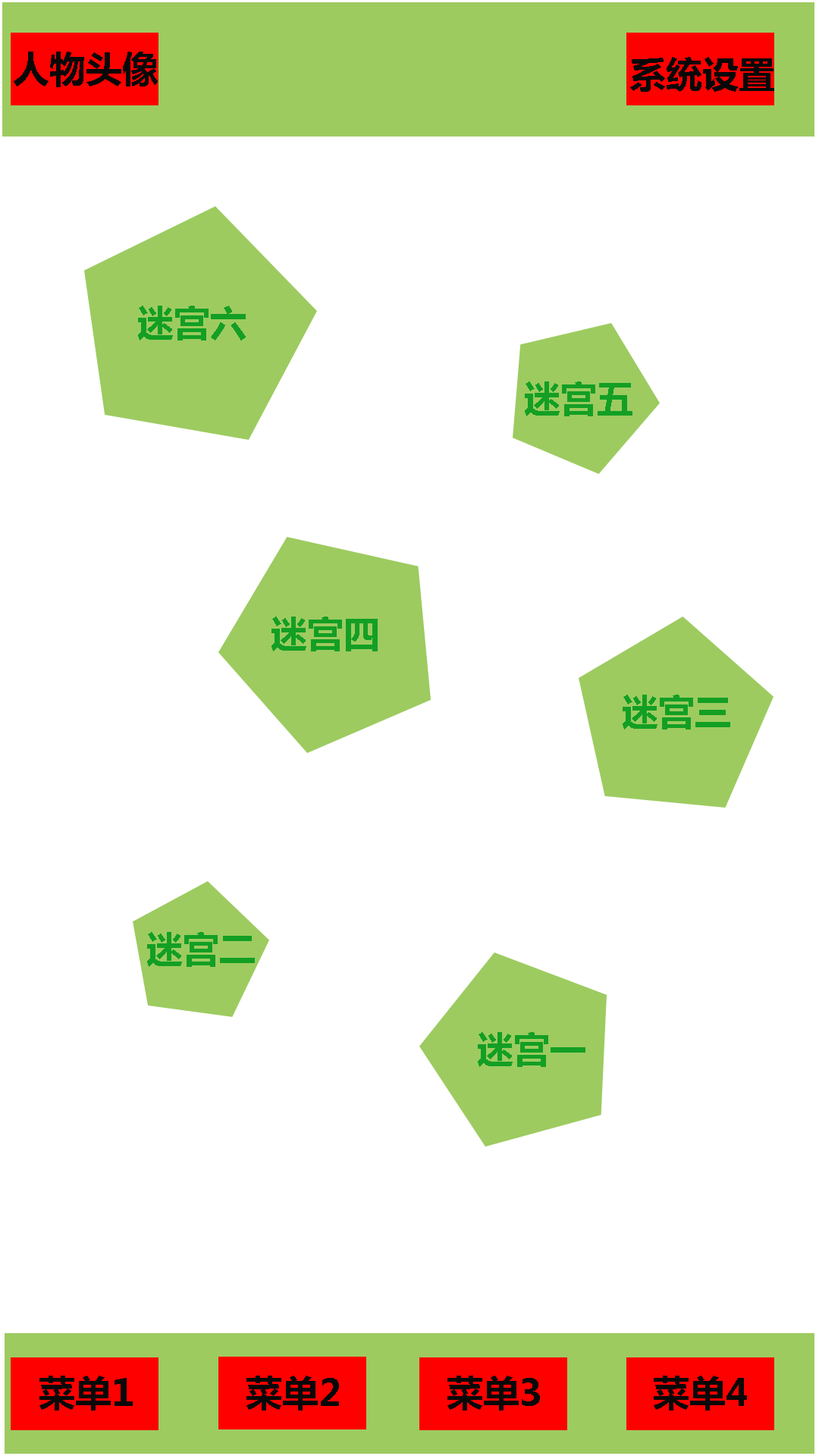
<style>
.page{position:relative;width:819px;height:1456px;background:#ffffff}
.page>*{position:absolute;margin:0}
.t1{font:36.4px "MicrosoftYaHei-Bold";color:#090808}
.t2{font:36.4px "MicrosoftYaHei-Bold";color:#139f24}
</style>
<div class="page">
<p class="t1" style="left:14px;top:52px;width:144px;height:35px">人物头像</p>
<p class="t1" style="left:630px;top:57px;width:144px;height:35px">系统设置</p>
<p class="t2" style="left:138px;top:306px;width:108px;height:34px">迷宫六</p>
<p class="t2" style="left:525px;top:381px;width:107px;height:35px">迷宫五</p>
<p class="t2" style="left:271px;top:617px;width:107px;height:34px">迷宫四</p>
<p class="t2" style="left:623px;top:695px;width:107px;height:35px">迷宫三</p>
<p class="t2" style="left:147px;top:932px;width:108px;height:35px">迷宫二</p>
<p class="t2" style="left:478px;top:1032px;width:107px;height:35px">迷宫一</p>
<p class="t1" style="left:39px;top:1376px;width:94px;height:34px">菜单1</p>
<p class="t1" style="left:246px;top:1376px;width:93px;height:34px">菜单2</p>
<p class="t1" style="left:447px;top:1376px;width:93px;height:34px">菜单3</p>
<p class="t1" style="left:654px;top:1376px;width:93px;height:34px">菜单4</p>
</div>
